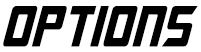
<style>
.page{position:relative;width:201px;height:52px;background:#ffffff}
.page>*{position:absolute;margin:0}
.t1{font:58.3px "MegatronCondensed-Italic";color:#000000}
</style>
<div class="page">
<p class="t1" style="left:3px;top:6px;width:195px;height:41px">options</p>
</div>
